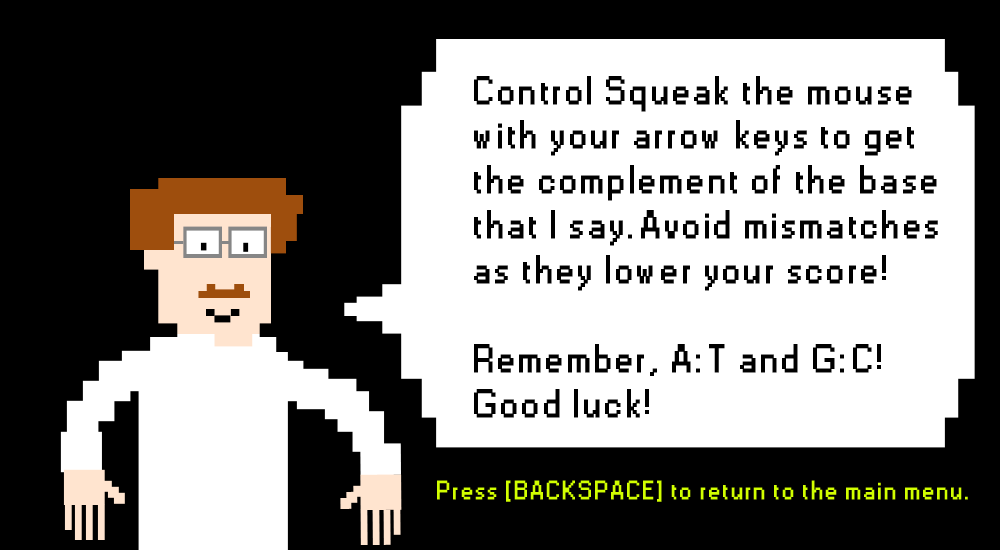
<style>
.page{position:relative;width:1000px;height:550px;background:#000000}
.page>*{position:absolute;margin:0}
.t1{font:37.2px "Small Fonts";letter-spacing:0.1em;color:#000000;font-weight:bold}
.t2{font:24.7px "Small Fonts";letter-spacing:0.1em;color:#d2ff00;font-weight:bold}
</style>
<div class="page">
<p class="t1" style="left:474px;top:76px;width:464px;height:342px">Control Squeak the mouse with your arrow keys to get the complement of the base that I say.Avoid mismatches as they lower your score!<br><br>Remember, A:T and G:C! Good luck!</p>
<p class="t2" style="left:437px;top:480px;width:531px;height:22px">Press [BACKSPACE] to return to the main menu.</p>
</div>
